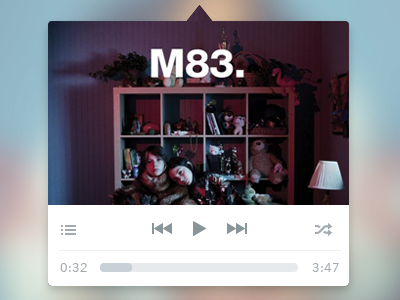
<style>
.page{position:relative;width:400px;height:300px}
.page>*{position:absolute;margin:0}
.t1{font:13px "AvenirNext-Regular";color:#a3abb0}
</style>
<div class="page">
<p class="t1" style="left:60px;top:263px;width:27px;height:9px">0:32</p>
<p class="t1" style="left:312px;top:263px;width:27px;height:9px">3:47</p>
</div>
